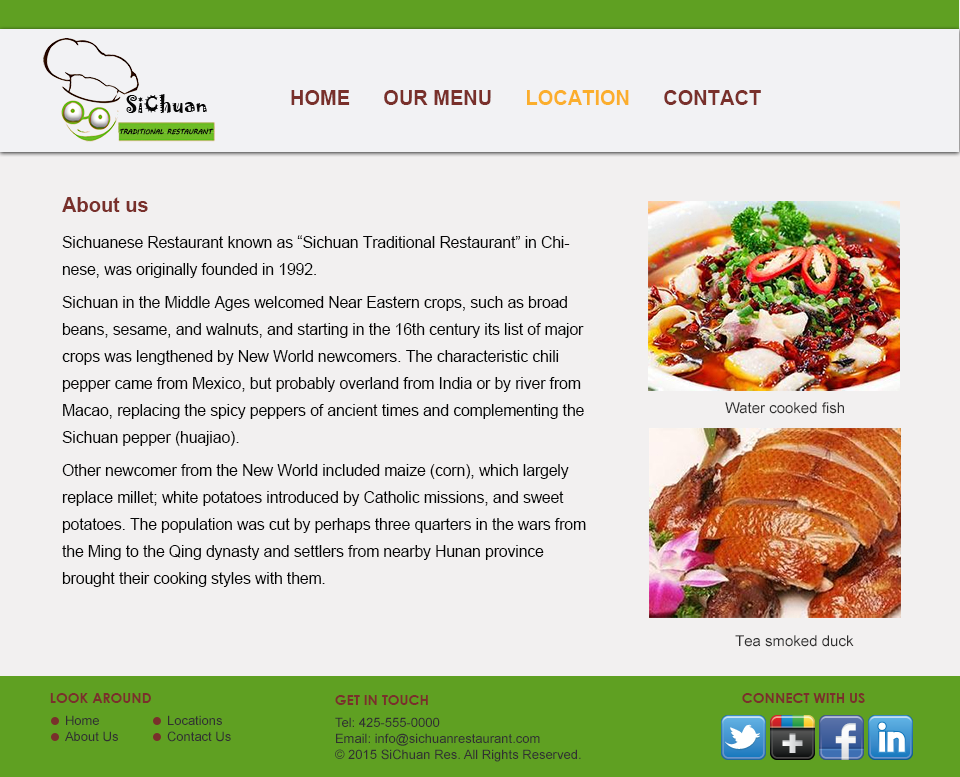
<style>
.page{position:relative;width:960px;height:777px;background:#f2f0f0}
.page>*{position:absolute;margin:0}
.t1{font:20px "Arial-BoldMT";color:#79302b}
.t2{font:20px "Arial-BoldMT";color:#fbae2c}
.t3{font:15.5px "ArialMT";color:#060606}
.t4{font:15px "ArialMT";color:#313030}
.t5{font:14px "CenturyGothic-Bold";color:#79302b;text-transform:uppercase}
.t6{font:13px "ArialMT";color:#313030}
</style>
<div class="page">
<p class="t1" style="left:291px;top:90px;width:470px;height:15px">HOME      OUR MENU      <span class="t2">LOCATION</span>      CONTACT</p>
<p class="t3" style="left:62px;top:197px;width:524px;height:390px"><span class="t1">About us<br>   <br></span>Sichuanese Restaurant known as “Sichuan Traditional Restaurant” in Chinese, was originally founded in 1992.<br>   <br>Sichuan in the Middle Ages welcomed Near Eastern crops, such as broad beans, sesame, and walnuts, and starting in the 16th century its list of major crops was lengthened by New World newcomers. The characteristic chili pepper came from Mexico, but probably overland from India or by river from Macao, replacing the spicy peppers of ancient times and complementing the Sichuan pepper (huajiao).<br>   <br>Other newcomer from the New World included maize (corn), which largely replace millet; white potatoes introduced by Catholic missions, and sweet potatoes. The population was cut by perhaps three quarters in the wars from the Ming to the Qing dynasty and settlers from nearby Hunan province brought their cooking styles with them.</p>
<p class="t4" style="left:725px;top:402px;width:119px;height:12px">Water cooked fish</p>
<p class="t4" style="left:735px;top:635px;width:119px;height:12px">Tea smoked duck</p>
<p class="t5" style="left:50px;top:693px;width:101px;height:10px">Look Around</p>
<p class="t5" style="left:335px;top:695px;width:93px;height:10px">Get in Touch</p>
<p class="t5" style="left:742px;top:693px;width:123px;height:10px">CONNECT WITH US</p>
<p class="t6" style="left:65px;top:715px;width:53px;height:27px">Home<br>About Us</p>
<p class="t6" style="left:167px;top:715px;width:64px;height:27px">Locations<br>Contact Us</p>
<p class="t6" style="left:335px;top:717px;width:246px;height:45px">Tel: 425-555-0000<br>Email: info@sichuanrestaurant.com<br>© 2015 SiChuan Res. All Rights Reserved.</p>
</div>
